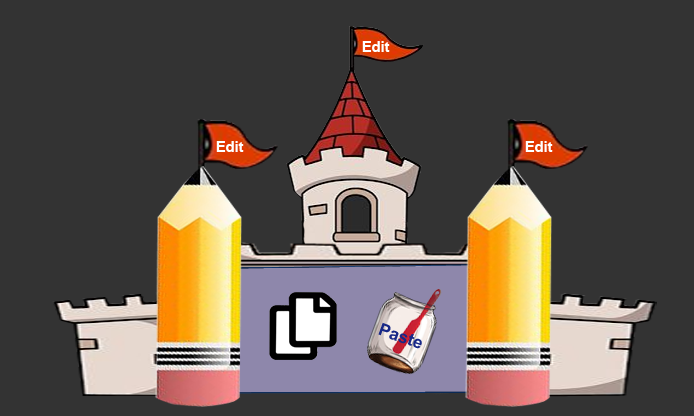
<style>
.page{position:relative;width:694px;height:416px;background:#333333}
.page>*{position:absolute;margin:0}
.t1{font:14.7px "Arial-BoldMT";color:#ffffff}
.t2{font:17.3px "Arial-BoldMT";color:#182887}
</style>
<div class="page">
<p class="t1" style="left:362px;top:41px;width:28px;height:11px">Edit</p>
<p class="t1" style="left:216px;top:141px;width:28px;height:11px">Edit</p>
<p class="t1" style="left:525px;top:141px;width:28px;height:11px">Edit</p>
<p class="t2" style="left:378px;top:322px;width:44px;height:27px;rotate:20deg">Paste</p>
</div>
